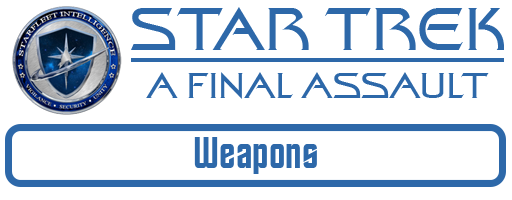
<style>
.page{position:relative;width:512px;height:200px;background:#ffffff}
.page>*{position:absolute;margin:0}
.t1{font:60px "StarTrekFilmBT-Regular";color:#2d68a9}
.t2{font:36px "StarTrekFilmBT-Regular";color:#2d68a9}
.t3{font:44px "StarTrekBT-Regular";color:#2d68a9}
</style>
<div class="page">
<p class="t1" style="left:131px;top:7px;width:373px;height:43px">STAR TREK</p>
<p class="t2" style="left:146px;top:72px;width:343px;height:27px">A FINAL ASSAULT</p>
<p class="t3" style="left:194px;top:137px;width:123px;height:37px">Weapons</p>
</div>
